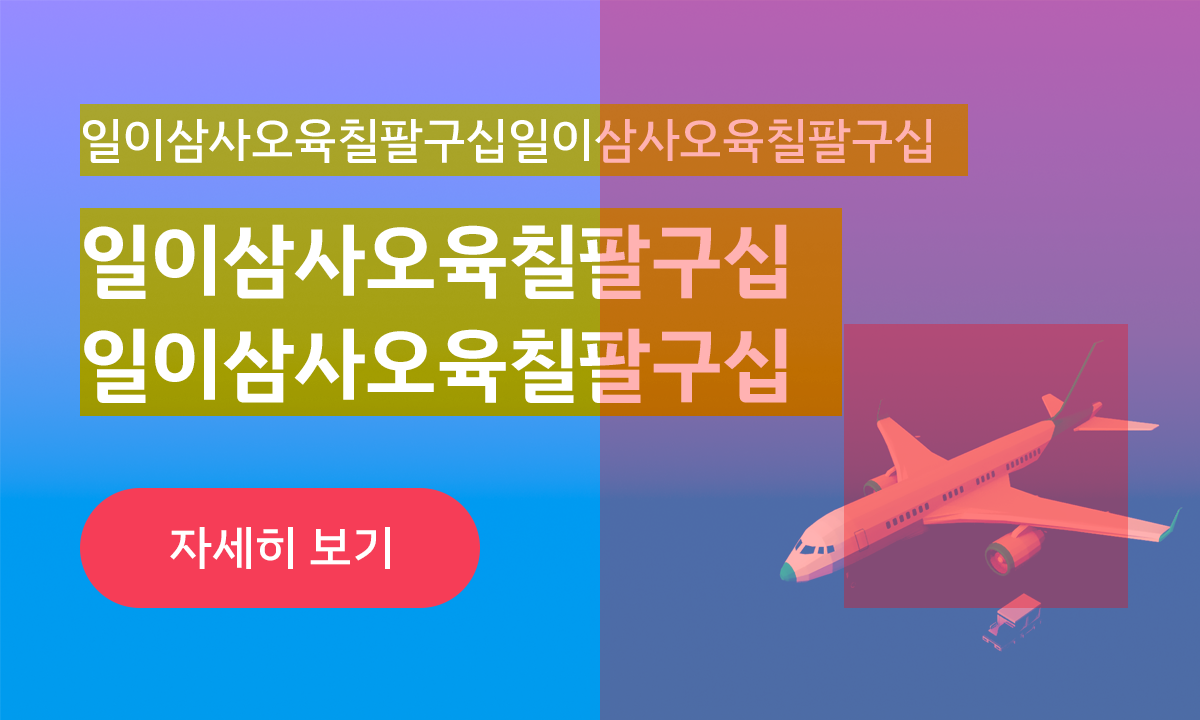
<style>
.page{position:relative;width:1200px;height:720px}
.page>*{position:absolute;margin:0}
.t1{font:48px "IBMPlexSansKR-Medium";color:#ffffff}
.t2{font:80px/104px "IBMPlexSansKR-Bold";color:#ffffff}
</style>
<div class="page">
<p class="t1" style="left:83px;top:119px;width:848px;height:44px">일이삼사오육칠팔구십일이삼사오육칠팔구십</p>
<p class="t2" style="left:84px;top:224px;width:703px;height:179px">일이삼사오육칠팔구십<br>일이삼사오육칠팔구십</p>
<p class="t1" style="left:170px;top:527px;width:220px;height:42px">자세히 보기</p>
</div>
